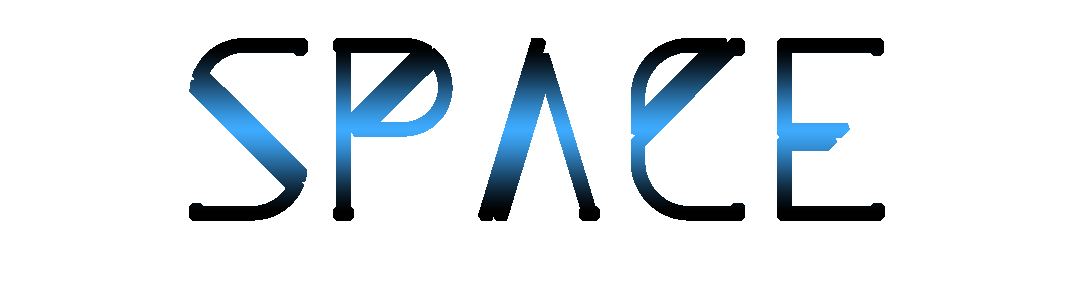
<style>
.page{position:relative;width:1080px;height:300px;background:#ffffff}
.page>*{position:absolute;margin:0}
.t1{font:250px "Astrobia";letter-spacing:-0.02em;font-weight:bold}
</style>
<div class="page">
<p class="t1" style="left:189px;top:38px;width:696px;height:183px">Space</p>
</div>
